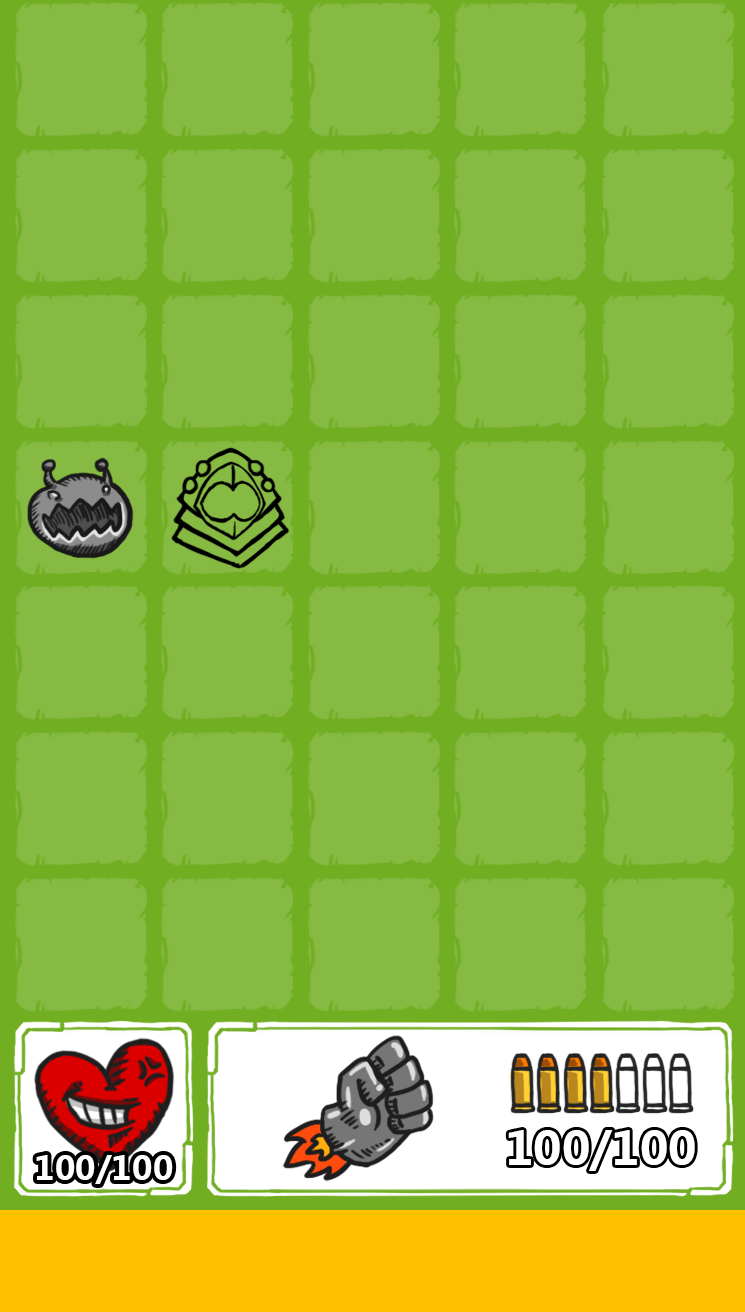
<style>
.page{position:relative;width:745px;height:1312px;background:#86ba42}
.page>*{position:absolute;margin:0}
.t1{font:45.8px "MicrosoftYaHei-Bold";color:#ffffff}
.t2{font:33.3px "MicrosoftYaHei-Bold";color:#ffffff}
</style>
<div class="page">
<p class="t1" style="left:508px;top:1130px;width:187px;height:41px">100/100</p>
<p class="t2" style="left:36px;top:1155px;width:137px;height:29px">100/100</p>
</div>
